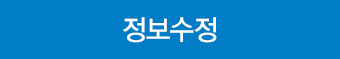
<style>
.page{position:relative;width:340px;height:59px;background:#007dc5}
.page>*{position:absolute;margin:0}
.t1{font:28px "YDVYGO33";letter-spacing:-0.025em;color:#ffffff;scale:0.95 1}
</style>
<div class="page">
<p class="t1" style="left:123px;top:17px;width:94px;height:26px">정보수정</p>
</div>
